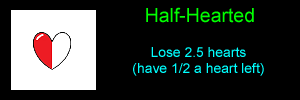
<style>
.page{position:relative;width:300px;height:100px;background:#000000}
.page>*{position:absolute;margin:0}
.t1{font:19.4px "ArialMT";color:#00ff00}
.t2{font:13.9px "ArialMT";color:#00ffff}
</style>
<div class="page">
<p class="t1" style="left:146px;top:7px;width:108px;height:16px">Half-Hearted</p>
<p class="t2" style="left:133px;top:47px;width:131px;height:29px;text-align:center">Lose 2.5 hearts<br>(have 1/2 a heart left)</p>
</div>
